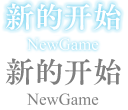
<style>
.page{position:relative;width:128px;height:110px;background:#ffffff}
.page>*{position:absolute;margin:0}
.t1{font:29.3px "FZFW-ZhuZiAOldMin-B--GB1-0";color:#ffffff}
.t2{font:29.3px "FZFW-ZhuZiAOldMin-B--GB1-0";color:#7f7f7f}
</style>
<div class="page">
<p class="t1" style="left:5px;top:3px;width:116px;height:28px">新的开始</p>
<p class="t2" style="left:5px;top:58px;width:116px;height:28px">新的开始</p>
</div>
